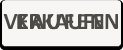
<style>
.page{position:relative;width:123px;height:50px;background:#f8f6f5}
.page>*{position:absolute;margin:0}
.t1{font:23.7px "Calibri-Bold";color:#4d4b46}
.t2{font:23.3px "Calibri-Bold";letter-spacing:0.09em;color:#4d4b46}
</style>
<div class="page">
<p class="t1" style="left:3px;top:14px;width:115px;height:16px">VERKAUFEN</p>
<p class="t2" style="left:17px;top:14px;width:87px;height:16px">KAUFEN</p>
</div>
